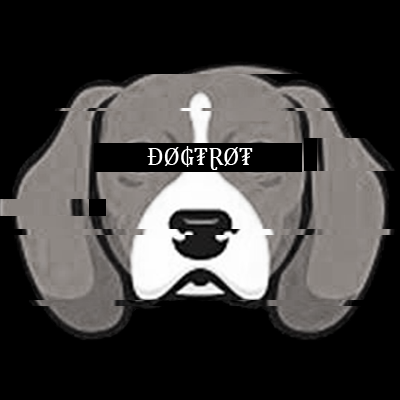
<style>
.page{position:relative;width:400px;height:400px;background:#000000}
.page>*{position:absolute;margin:0}
.t1{font:25px "Cambria";color:#ffffff}
</style>
<div class="page">
<p class="t1" style="left:147px;top:146px;width:106px;height:24px">ĐØ₲₮ⱤØ₮</p>
</div>
